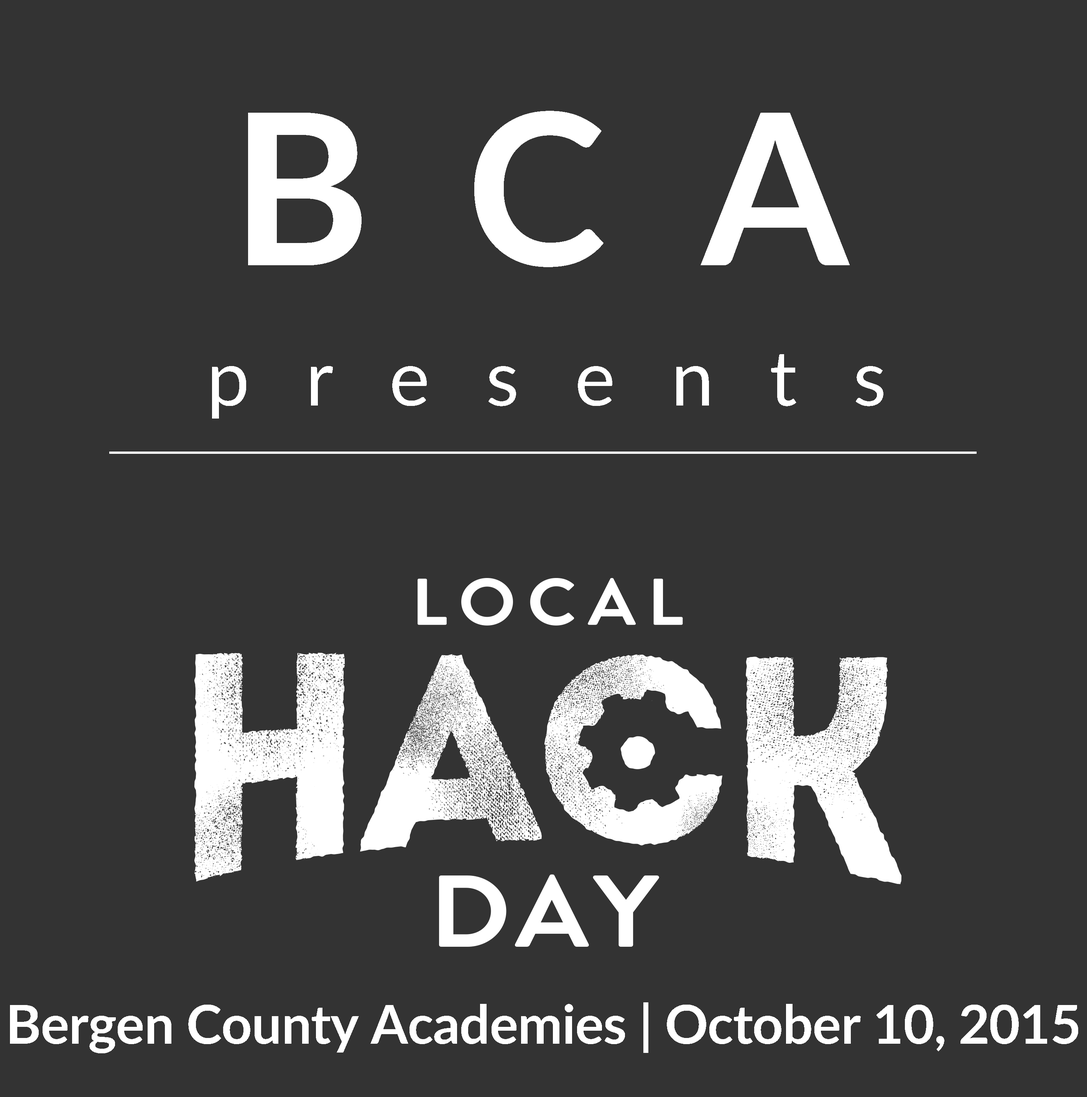
<style>
.page{position:relative;width:1087px;height:1097px;background:#333333}
.page>*{position:absolute;margin:0}
.t1{font:210.8px "Lato-Bold";letter-spacing:-0.01em;color:#ffffff}
.t2{font:76.7px "Lato-Regular";letter-spacing:-0.01em;color:#ffffff}
.t3{font:53.7px "Lato-Bold";letter-spacing:-0.01em;color:#ffffff}
</style>
<div class="page">
<p class="t1" style="left:248px;top:111px;width:602px;height:156px">B  C  A</p>
<p class="t2" style="left:212px;top:354px;width:671px;height:65px">p   r   e   s   e   n   t   s</p>
<p class="t3" style="left:10px;top:1002px;width:1068px;height:51px">Bergen County Academies | October 10, 2015</p>
</div>
